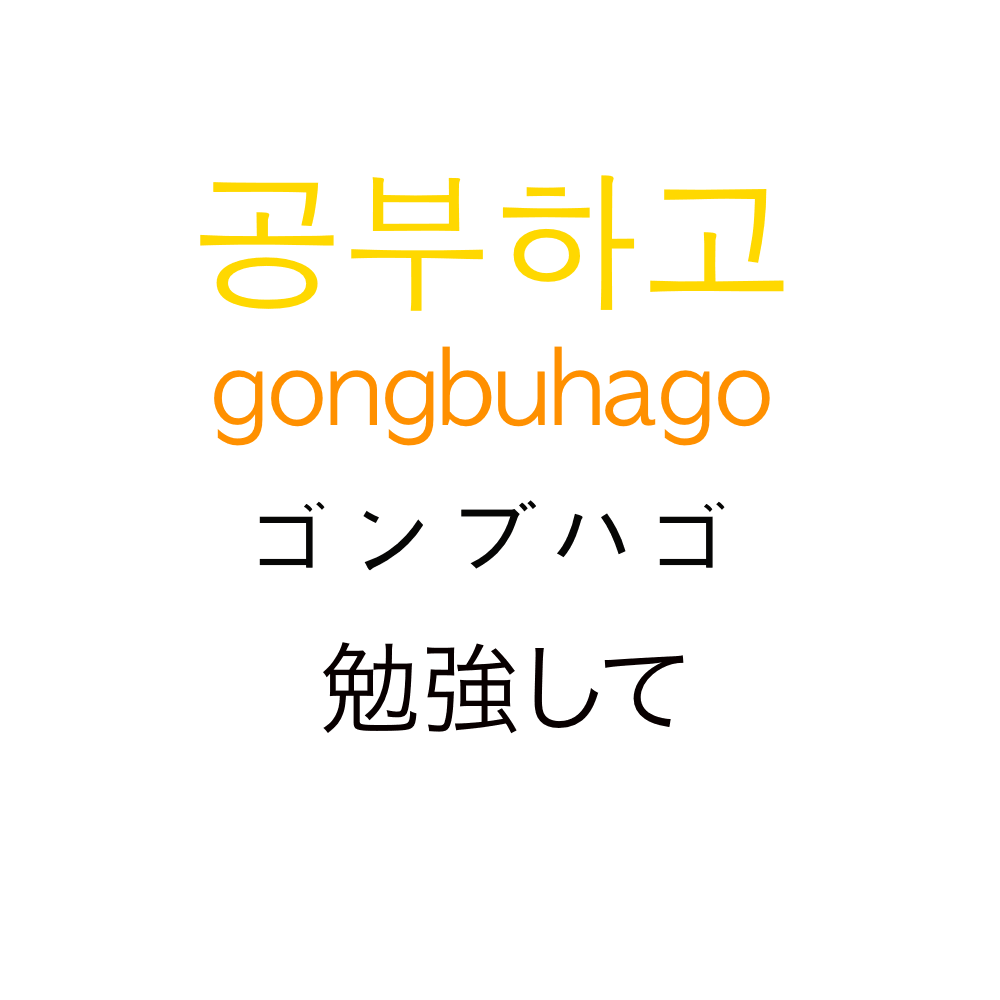
<style>
.page{position:relative;width:1000px;height:1000px;background:#ffffff}
.page>*{position:absolute;margin:0}
.t1{font:150px "AppleGothic";color:#ffd800}
.t2{font:100px "AppleGothic";color:#ff9000}
.t3{font:100px "AppleGothic";color:#060605}
.t4{font:100px "HiraKakuProN-W3";color:#080000}
</style>
<div class="page">
<p class="t1" style="left:200px;top:175px;width:584px;height:136px">공부하고</p>
<p class="t2" style="left:214px;top:346px;width:556px;height:100px">gongbuhago</p>
<p class="t3" style="left:259px;top:500px;width:466px;height:71px">ゴンブハゴ</p>
<p class="t4" style="left:323px;top:642px;width:361px;height:92px">勉強して</p>
</div>
